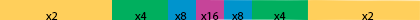
<style>
.page{position:relative;width:420px;height:20px;background:#ffcf5b}
.page>*{position:absolute;margin:0}
.t1{font:12px "MyriadPro-Regular";color:#000000}
</style>
<div class="page">
<p class="t1" style="left:46px;top:12px;width:12px;height:8px">x2</p>
<p class="t1" style="left:135px;top:12px;width:12px;height:8px">x4</p>
<p class="t1" style="left:175px;top:12px;width:12px;height:8px">x8</p>
<p class="t1" style="left:201px;top:12px;width:18px;height:8px">x16</p>
<p class="t1" style="left:232px;top:12px;width:12px;height:8px">x8</p>
<p class="t1" style="left:274px;top:12px;width:12px;height:8px">x4</p>
<p class="t1" style="left:362px;top:12px;width:12px;height:8px">x2</p>
</div>
